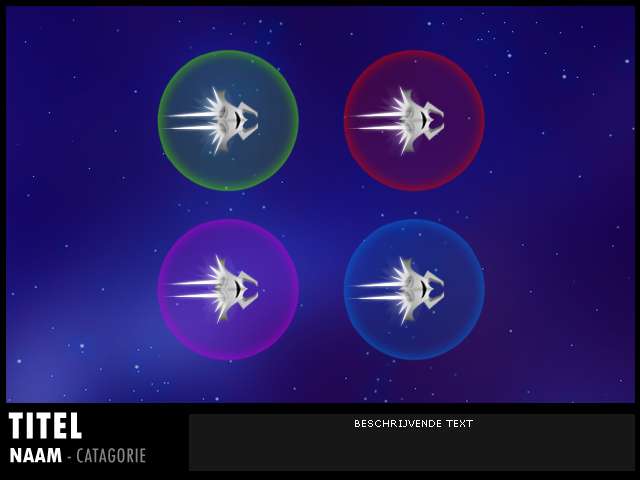
<style>
.page{position:relative;width:640px;height:480px}
.page>*{position:absolute;margin:0}
.t1{font:40px "TwCenMT-CondensedExtraBold";color:#ffffff}
.t2{font:10px "Verdana";color:#ffffff}
.t3{font:22px "TwCenMT-Condensed";color:#868686}
.t4{font:22px "TwCenMT-CondensedExtraBold";color:#ffffff}
</style>
<div class="page">
<p class="t1" style="left:8px;top:412px;width:74px;height:27px">TITEL</p>
<p class="t2" style="left:355px;top:420px;width:118px;height:7px">BESCHRIJVENDE TEXT</p>
<p class="t3" style="left:10px;top:448px;width:136px;height:15px"><span class="t4">NAAM </span>- CATAGORIE</p>
</div>
